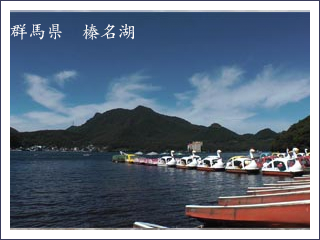
<style>
.page{position:relative;width:320px;height:240px}
.page>*{position:absolute;margin:0}
.t1{font:18px "DFKaiSho-Md-MP-RKSJ-H";color:#ffffff}
</style>
<div class="page">
<p class="t1" style="left:10px;top:24px;width:124px;height:16px">群馬県　榛名湖</p>
</div>
